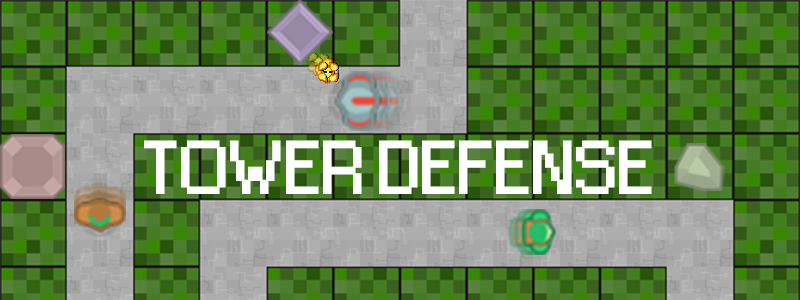
<style>
.page{position:relative;width:800px;height:300px}
.page>*{position:absolute;margin:0}
.t1{font:70px "Small Fonts";letter-spacing:0.01em;color:#ffffff;text-transform:uppercase;font-weight:bold;scale:1.1 1}
</style>
<div class="page">
<p class="t1" style="left:144px;top:140px;width:508px;height:54px">Tower Defense</p>
</div>
